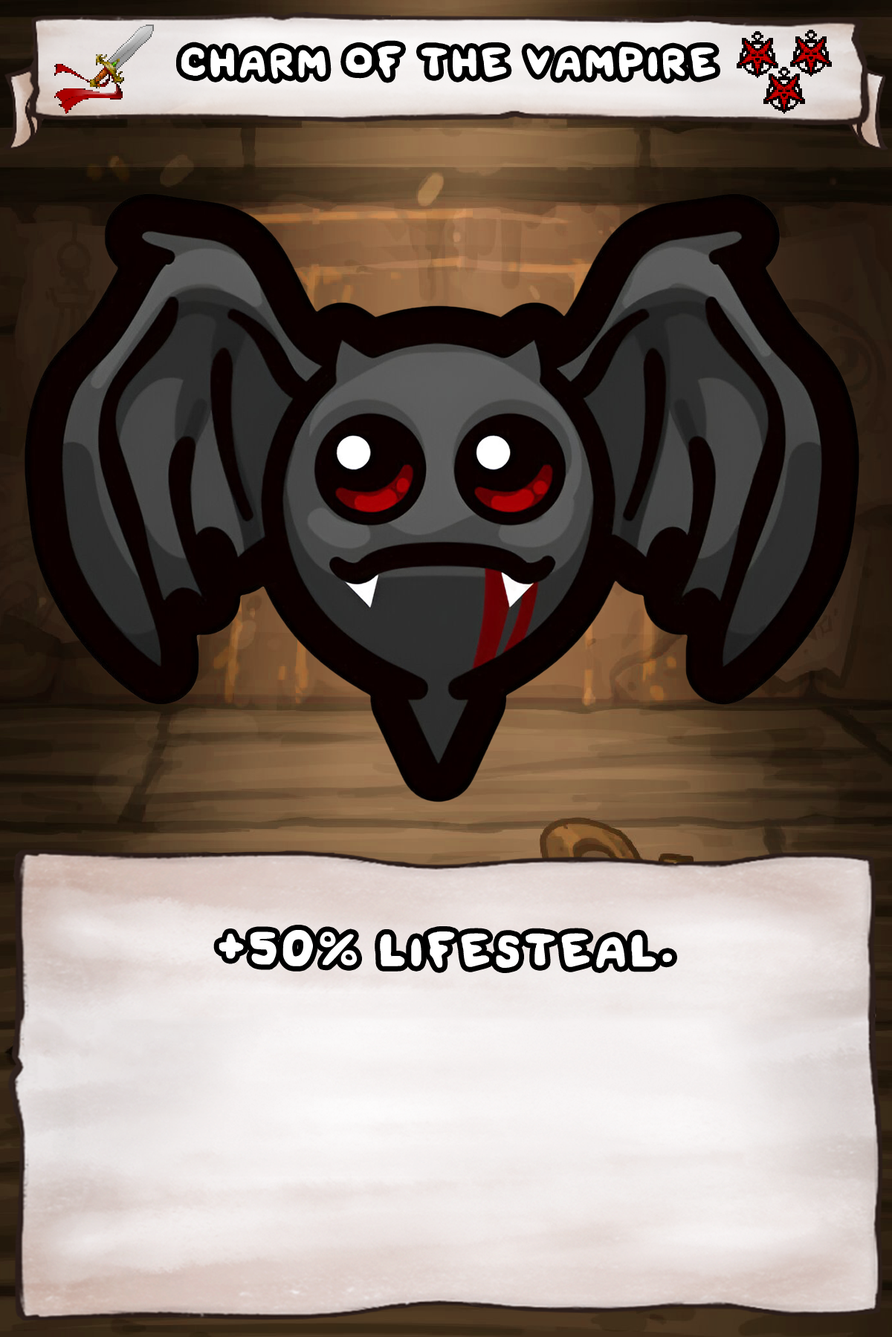
<style>
.page{position:relative;width:892px;height:1337px}
.page>*{position:absolute;margin:0}
.t1{font:98.8px "Font_soulsV2_Body-Regular";color:#ffffff}
.t2{font:112.9px "Font_soulsV2_Body-Regular";color:#ffffff}
</style>
<div class="page">
<p class="t1" style="left:181px;top:45px;width:534px;height:34px">Charm of the Vampire</p>
<p class="t2" style="left:218px;top:930px;width:454px;height:38px">+50% Lifesteal.</p>
</div>
